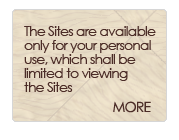
<style>
.page{position:relative;width:179px;height:140px;background:#ffffff}
.page>*{position:absolute;margin:0}
.t1{font:14px/14px "CenturyGothic";letter-spacing:-0.06em;color:#4b2c27}
.t2{font:14px "CenturyGothic";letter-spacing:-0.06em;color:#4b2c27}
</style>
<div class="page">
<p class="t1" style="left:24px;top:26px;width:132px;height:66px">The Sites are available<br>only for your personal<br>use, which shall be<br>limited to viewing<br>the Sites</p>
<p class="t2" style="left:113px;top:101px;width:38px;height:12px">MORE</p>
</div>
